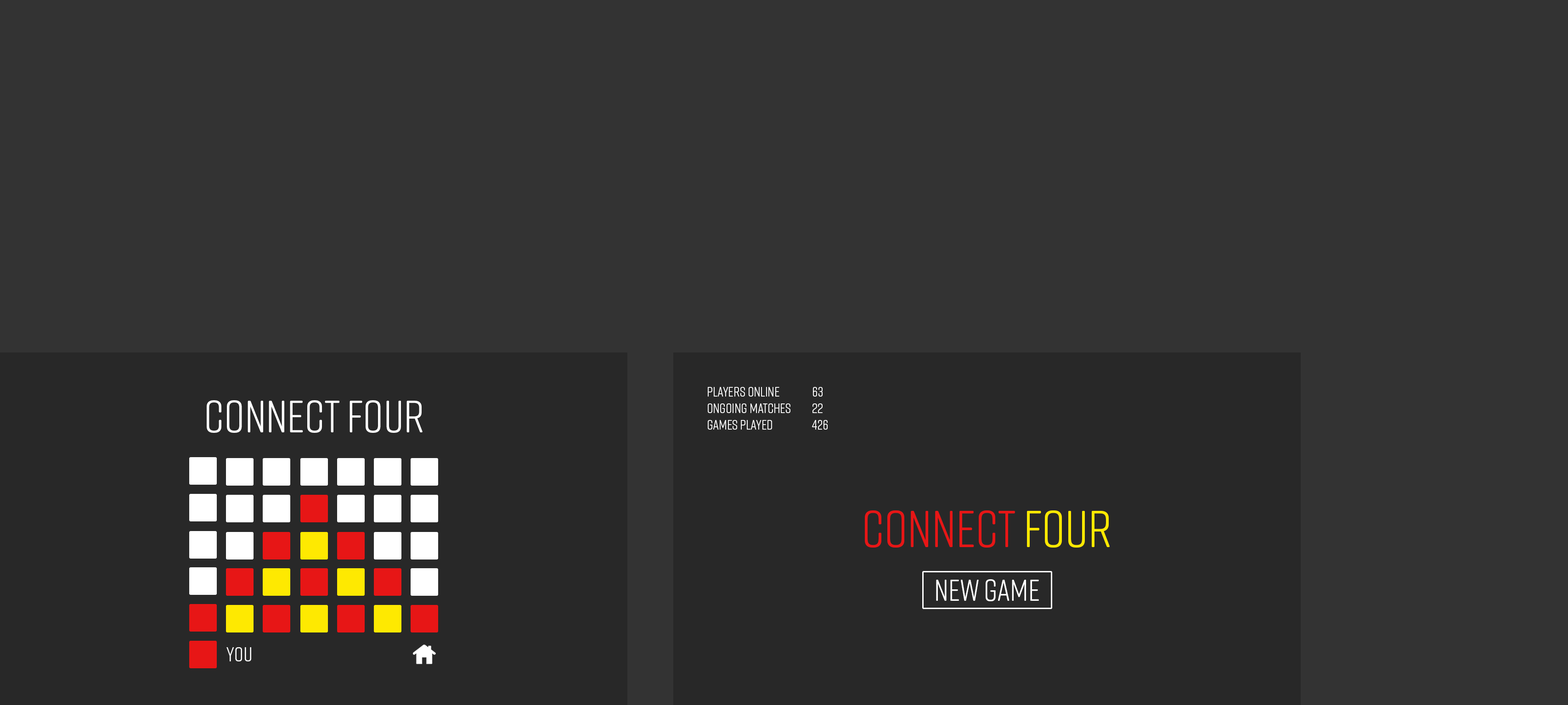
<style>
.page{position:relative;width:1568px;height:705px;background:#333333}
.page>*{position:absolute;margin:0}
.t1{font:13.8px "RiftSoft-Regular";color:#ffffff}
.t2{font:45.5px "RiftSoft-Regular";color:#ffffff}
.t3{font:51.6px "RiftSoft-Regular";color:#e71616}
.t4{font:51.6px "RiftSoft-Regular";color:#fee901}
.t5{font:30.3px "RiftSoft-Regular";color:#ffffff}
.t6{font:20.2px "RiftSoft-Regular";color:#ffffff}
</style>
<div class="page">
<p class="t1" style="left:708px;top:387px;width:82px;height:43px">players online<br>ongoing matches<br>Games played</p>
<p class="t1" style="left:812px;top:387px;width:16px;height:43px">63<br>22<br>426</p>
<p class="t2" style="left:207px;top:400px;width:216px;height:33px">CONNECT FOUR</p>
<p class="t3" style="left:865px;top:511px;width:245px;height:37px">CONNECT <span class="t4">FOUR</span></p>
<p class="t5" style="left:936px;top:580px;width:103px;height:22px">new game</p>
<p class="t6" style="left:226px;top:648px;width:25px;height:14px">you</p>
</div>
